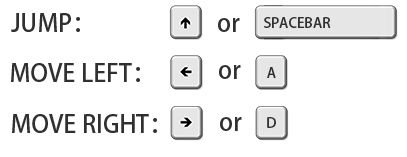
<style>
.page{position:relative;width:407px;height:157px;background:#ffffff}
.page>*{position:absolute;margin:0}
.t1{font:24px "AdobeHeitiStd-Regular";color:#303030}
.t2{font:14px "AdobeHeitiStd-Regular";color:#303030}
</style>
<div class="page">
<p class="t1" style="left:11px;top:13px;width:69px;height:19px">JUMP：</p>
<p class="t2" style="left:264px;top:17px;width:67px;height:11px">SPACEBAR</p>
<p class="t1" style="left:218px;top:18px;width:22px;height:14px">or</p>
<p class="t1" style="left:11px;top:63px;width:129px;height:19px">MOVE LEFT：</p>
<p class="t1" style="left:219px;top:65px;width:22px;height:14px">or</p>
<p class="t2" style="left:267px;top:67px;width:9px;height:11px">A</p>
<p class="t1" style="left:12px;top:114px;width:145px;height:19px">MOVE RIGHT：</p>
<p class="t1" style="left:220px;top:117px;width:22px;height:14px">or</p>
<p class="t2" style="left:267px;top:117px;width:9px;height:11px">D</p>
</div>
